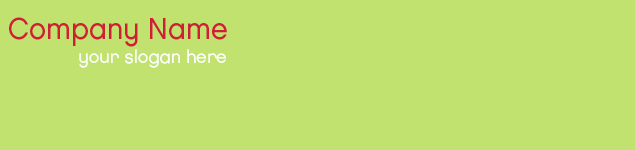
<style>
.page{position:relative;width:635px;height:150px;background:#c1e26e}
.page>*{position:absolute;margin:0}
.t1{font:30.4px "Chalet-LondonNineteenEighty";color:#cf1f34;scale:0.94 1}
.t2{font:18px "Chalet-LondonNineteenEighty";color:#fcfcfb}
</style>
<div class="page">
<p class="t1" style="left:9px;top:17px;width:218px;height:30px">Company Name</p>
<p class="t2" style="left:79px;top:49px;width:148px;height:19px">your slogan here</p>
</div>
